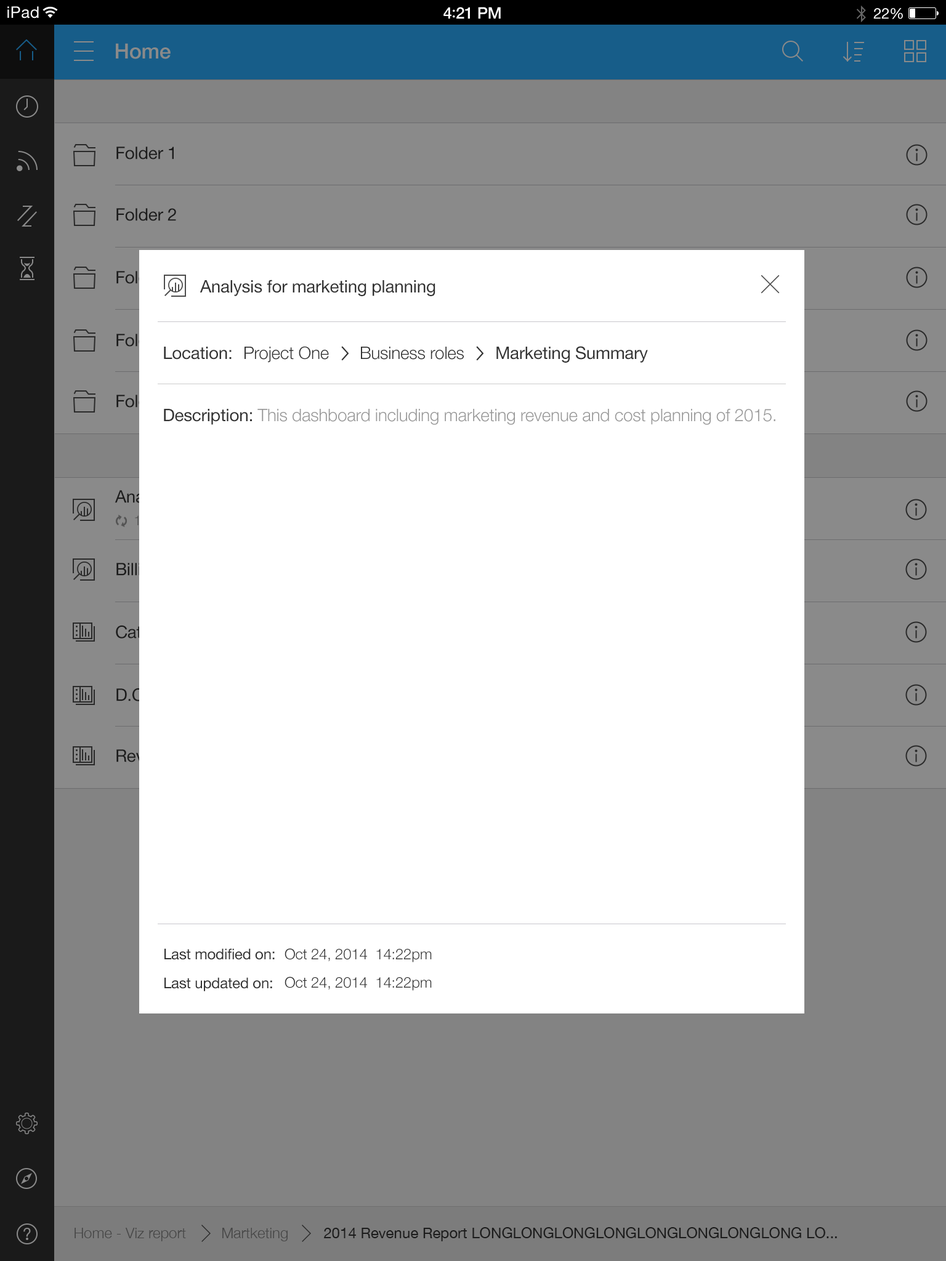
<style>
.page{position:relative;width:946px;height:1261px;background:#ffffff}
.page>*{position:absolute;margin:0}
.t1{font:16px "HelveticaNeue";letter-spacing:0.02em;color:#ffffff}
.t2{font:16px "HelveticaNeue-Medium";letter-spacing:-0.02em;color:#ffffff}
.t3{font:16px "Avenir-Medium";letter-spacing:-0.02em;color:#ffffff}
.t4{font:14.8px "HelveticaNeue";letter-spacing:-0.02em;color:#ffffff}
.t5{font:20.9px "HelveticaNeue-Medium";letter-spacing:-0.01em;color:#8a8a8a}
.t6{font:17.2px "HelveticaNeue";letter-spacing:-0.01em;color:#333333}
.t7{font:17.2px "HelveticaNeue-Light";letter-spacing:-0.01em;color:#333333}
.t8{font:18.5px "EuphemiaUCAS";letter-spacing:-0.01em;color:#333333}
.t9{font:17.2px "HelveticaNeue-Light";letter-spacing:-0.01em;color:#999999}
.t10{font:14.8px "HelveticaNeue";letter-spacing:-0.01em;color:#333333}
.t11{font:14.8px "HelveticaNeue-Light";letter-spacing:-0.01em;color:#333333}
.t12{font:14.8px "HelveticaNeue-Light";color:#333333}
.t13{font:14.8px "HelveticaNeue";color:#333333}
</style>
<div class="page">
<p class="t1" style="left:7px;top:6px;width:32px;height:12px">iPad</p>
<p class="t2" style="left:443px;top:7px;width:58px;height:12px">4<span class="t3">:</span>21 PM</p>
<p class="t4" style="left:873px;top:8px;width:30px;height:11px">22%</p>
<p class="t5" style="left:116px;top:43px;width:55px;height:16px">Home</p>
<p class="t6" style="left:116px;top:147px;width:58px;height:12px">Folder 1</p>
<p class="t6" style="left:116px;top:208px;width:60px;height:13px">Folder 2</p>
<p class="t6" style="left:199px;top:280px;width:236px;height:16px">Analysis for marketing planning</p>
<p class="t6" style="left:164px;top:347px;width:67px;height:13px">Location:</p>
<p class="t7" style="left:244px;top:346px;width:85px;height:17px">Project One</p>
<p class="t8" style="left:341px;top:346px;width:8px;height:15px">&gt;</p>
<p class="t7" style="left:361px;top:347px;width:103px;height:13px">Business roles</p>
<p class="t8" style="left:476px;top:346px;width:8px;height:15px">&gt;</p>
<p class="t6" style="left:496px;top:346px;width:152px;height:17px">Marketing Summary</p>
<p class="t9" style="left:164px;top:409px;width:611px;height:16px"><span class="t6">Description: </span>This dashboard including marketing revenue and cost planning of 2015.</p>
<p class="t10" style="left:164px;top:948px;width:111px;height:12px">Last modified on:</p>
<p class="t11" style="left:284px;top:948px;width:148px;height:14px">Oct 24, 2014  14:22pm</p>
<p class="t10" style="left:164px;top:977px;width:108px;height:14px">Last updated on:</p>
<p class="t11" style="left:284px;top:976px;width:148px;height:15px">Oct 24, 2014  14:22pm</p>
<p class="t12" style="left:74px;top:1228px;width:112px;height:13px;opacity:0.65">Home - Viz report</p>
<p class="t12" style="left:222px;top:1228px;width:66px;height:13px;opacity:0.65">Martketing</p>
<p class="t13" style="left:324px;top:1227px;width:513px;height:14px">2014 Revenue Report LONGLONGLONGLONGLONGLONGLONGLONG LO...</p>
</div>
